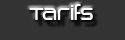
<style>
.page{position:relative;width:125px;height:40px;background:#333333}
.page>*{position:absolute;margin:0}
.t1{font:20px "BirdmanBold";color:#ffffff}
</style>
<div class="page">
<p class="t1" style="left:29px;top:4px;width:64px;height:16px">Tarifs</p>
</div>
